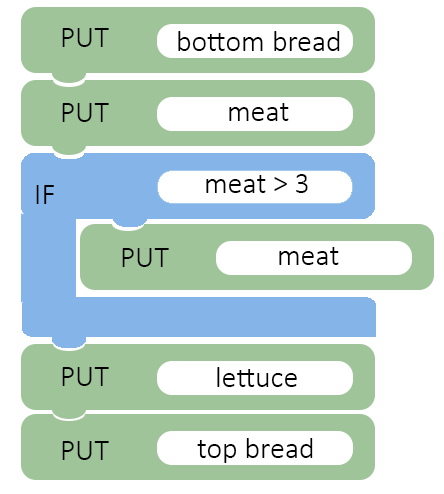
<style>
.page{position:relative;width:444px;height:494px;background:#ffffff}
.page>*{position:absolute;margin:0}
.t1{font:30px "Calibri-Light";color:#000000}
</style>
<div class="page">
<p class="t1" style="left:62px;top:28px;width:47px;height:19px">PUT</p>
<p class="t1" style="left:178px;top:31px;width:162px;height:20px">bottom bread</p>
<p class="t1" style="left:62px;top:103px;width:47px;height:19px">PUT</p>
<p class="t1" style="left:229px;top:103px;width:60px;height:18px">meat</p>
<p class="t1" style="left:206px;top:174px;width:102px;height:19px">meat &gt; 3</p>
<p class="t1" style="left:36px;top:185px;width:18px;height:19px">IF</p>
<p class="t1" style="left:122px;top:248px;width:47px;height:19px">PUT</p>
<p class="t1" style="left:279px;top:247px;width:60px;height:18px">meat</p>
<p class="t1" style="left:62px;top:367px;width:47px;height:19px">PUT</p>
<p class="t1" style="left:217px;top:367px;width:80px;height:20px">lettuce</p>
<p class="t1" style="left:197px;top:438px;width:116px;height:25px">top bread</p>
<p class="t1" style="left:62px;top:441px;width:47px;height:19px">PUT</p>
</div>
